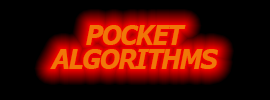
<style>
.page{position:relative;width:270px;height:100px;background:#000000}
.page>*{position:absolute;margin:0}
.t1{font:26.6px/24px "Verdana-BoldItalic";letter-spacing:-0.075em;color:#f07508;text-transform:uppercase;scale:0.9 1}
.t2{font:26.6px/24px "Verdana-BoldItalic";letter-spacing:-0.075em;color:#ff002a;text-transform:uppercase;scale:0.9 1}
</style>
<div class="page">
<p class="t1" style="left:50px;top:25px;width:168px;height:44px;text-align:center"><span class="t2"> </span>Pocket<br> Algorithms</p>
</div>
